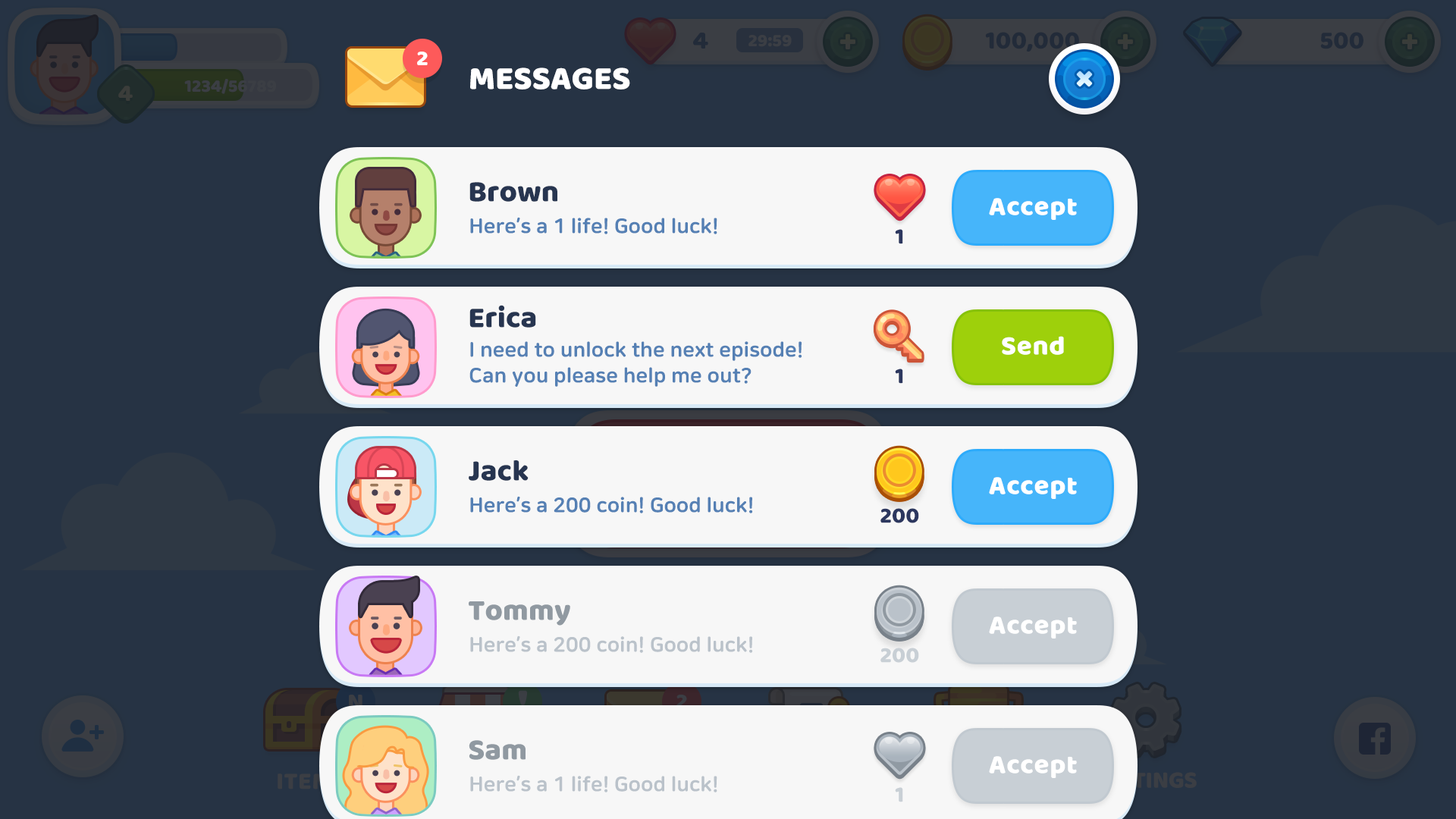
<style>
.page{position:relative;width:1456px;height:819px;background:#263344}
.page>*{position:absolute;margin:0}
.t1{font:22.7px "BalooBhaijaan-Regular";color:#ffffff}
.t2{font:33.4px "BalooBhaijaan-Regular";color:#ffffff;text-transform:uppercase}
.t3{font:30.3px "BalooBhaijaan-Regular";color:#273550}
.t4{font:27.3px "BalooBhaijaan-Regular";color:#ffffff}
.t5{font:20.5px "NanumSquareRoundOTFEB";color:#5580b4}
.t6{font:22.7px "BalooBhaijaan-Regular";color:#2c375f}
.t7{font:20.5px/25.8px "NanumSquareRoundOTFEB";color:#5580b4}
.t8{font:30.3px "BalooBhaijaan-Regular";color:#9099a1}
.t9{font:20.5px "NanumSquareRoundOTFEB";color:#bac2ca}
.t10{font:22.7px "BalooBhaijaan-Regular";color:#c8cfd5}
</style>
<div class="page">
<p class="t1" style="left:417px;top:52px;width:11px;height:13px">2</p>
<p class="t2" style="left:470px;top:67px;width:160px;height:22px">Messages</p>
<p class="t3" style="left:469px;top:182px;width:88px;height:20px">Brown</p>
<p class="t4" style="left:989px;top:198px;width:88px;height:22px">Accept</p>
<p class="t5" style="left:470px;top:217px;width:247px;height:17px">Here’s a 1 life! Good luck!</p>
<p class="t6" style="left:895px;top:229px;width:8px;height:15px">1</p>
<p class="t3" style="left:469px;top:305px;width:67px;height:23px">Erica</p>
<p class="t7" style="left:469px;top:341px;width:333px;height:46px">I need to unlock the next episode! <br>Can you please help me out?</p>
<p class="t4" style="left:1002px;top:336px;width:62px;height:19px">Send</p>
<p class="t6" style="left:895px;top:369px;width:8px;height:15px">1</p>
<p class="t3" style="left:469px;top:460px;width:60px;height:21px">Jack</p>
<p class="t4" style="left:989px;top:477px;width:88px;height:22px">Accept</p>
<p class="t5" style="left:470px;top:496px;width:283px;height:17px">Here’s a 200 coin! Good luck!</p>
<p class="t6" style="left:880px;top:508px;width:39px;height:15px">200</p>
<p class="t8" style="left:469px;top:601px;width:101px;height:25px">Tommy</p>
<p class="t4" style="left:989px;top:617px;width:88px;height:22px">Accept</p>
<p class="t9" style="left:470px;top:635px;width:283px;height:18px">Here’s a 200 coin! Good luck!</p>
<p class="t10" style="left:880px;top:648px;width:39px;height:15px">200</p>
<p class="t8" style="left:469px;top:740px;width:57px;height:20px">Sam</p>
<p class="t4" style="left:989px;top:756px;width:88px;height:22px">Accept</p>
<p class="t9" style="left:470px;top:775px;width:247px;height:17px">Here’s a 1 life! Good luck!</p>
<p class="t10" style="left:895px;top:787px;width:8px;height:15px">1</p>
</div>
